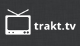
<style>
.page{position:relative;width:80px;height:46px;background:#37383a}
.page>*{position:absolute;margin:0}
.t1{font:10.5px "DroidSans-Bold";color:#ffffff;scale:1.09 1}
</style>
<div class="page">
<p class="t1" style="left:34px;top:21px;width:42px;height:9px">trakt.tv</p>
</div>
